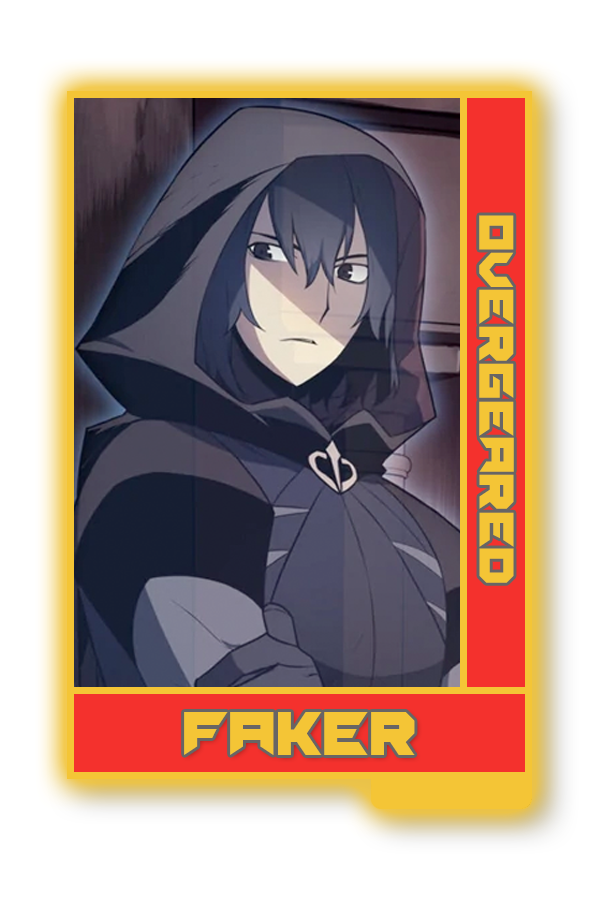
<style>
.page{position:relative;width:600px;height:900px;background:#ffffff}
.page>*{position:absolute;margin:0}
.t1{font:48.8px "Suggested-Regular";color:#f4c536}
.t2{font:62.5px "Suggested-Regular";color:#f4c536}
</style>
<div class="page">
<p class="t1" style="left:479px;top:215px;width:35px;height:368px;rotate:90deg">OVERGEARED</p>
<p class="t2" style="left:184px;top:712px;width:231px;height:43px">FAKER</p>
</div>
